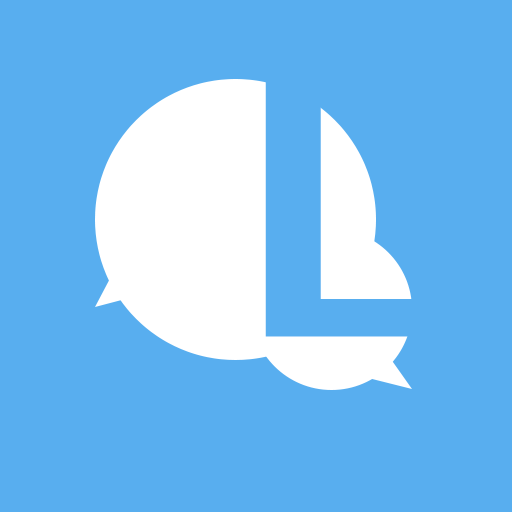
<style>
.page{position:relative;width:512px;height:512px;background:#58aeef}
.page>*{position:absolute;margin:0}
.t1{font:363.3px "LucidaGrande-Bold";letter-spacing:0.02em;color:#58aeef}
</style>
<div class="page">
<p class="t1" style="left:265px;top:73px;width:174px;height:264px">L</p>
</div>
